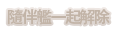
<style>
.page{position:relative;width:115px;height:34px;background:#ffffff}
.page>*{position:absolute;margin:0}
.t1{font:16px "GothicMB101Pr6N-Medium";letter-spacing:-0.1em;color:#c2b4a7}
</style>
<div class="page">
<p class="t1" style="left:7px;top:9px;width:103px;height:16px">隨伴艦一起解除</p>
</div>
